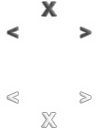
<style>
.page{position:relative;width:98px;height:130px;background:#ffffff}
.page>*{position:absolute;margin:0}
.t1{font:20px "AvenirNext-Bold";color:#4f4f4f}
</style>
<div class="page">
<p class="t1" style="left:41px;top:2px;width:16px;height:14px">X</p>
<p class="t1" style="left:7px;top:27px;width:11px;height:11px">&lt;</p>
<p class="t1" style="left:80px;top:27px;width:11px;height:11px">&gt;</p>
</div>
